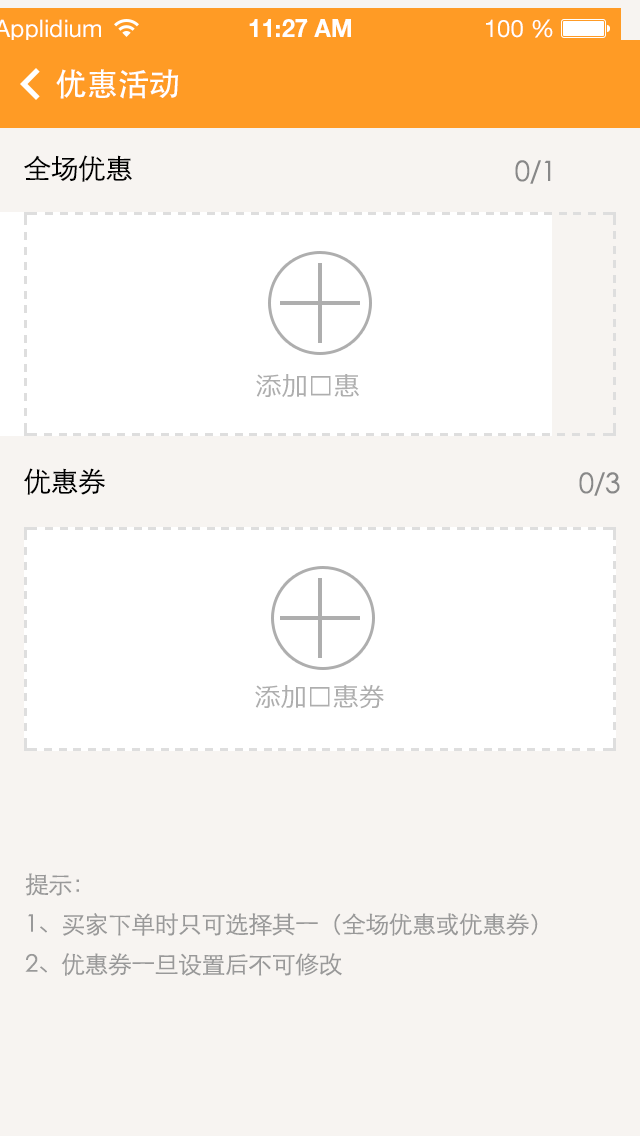
<style>
.page{position:relative;width:640px;height:1136px;background:#f7f4f1}
.page>*{position:absolute;margin:0}
.t1{font:32px "STHeiti";letter-spacing:-0.025em;color:#ffffff}
.t2{font:28px "STXihei";letter-spacing:-0.025em;color:#000000}
.t3{font:28px "STXihei";letter-spacing:-0.025em;color:#888888}
.t4{font:26px "Meiryo";color:#aeaeae}
.t5{font:26px "STHeiti";color:#aeaeae}
.t6{font:24px/40px "STXihei";letter-spacing:-0.025em;color:#999999}
</style>
<div class="page">
<p class="t1" style="left:56px;top:69px;width:123px;height:30px">优惠活动</p>
<p class="t2" style="left:24px;top:155px;width:108px;height:27px">全场优惠</p>
<p class="t3" style="left:515px;top:160px;width:36px;height:24px">0/1</p>
<p class="t4" style="left:256px;top:374px;width:103px;height:23px">添加<span class="t5">优</span>惠</p>
<p class="t2" style="left:24px;top:468px;width:81px;height:27px">优惠券</p>
<p class="t3" style="left:579px;top:472px;width:41px;height:24px">0/3</p>
<p class="t4" style="left:255px;top:685px;width:129px;height:24px">添加<span class="t5">优</span>惠券</p>
<p class="t6" style="left:25px;top:873px;width:513px;height:103px">提示：<br>1、买家下单时只可选择其一（全场优惠或优惠券）<br>2、优惠券一旦设置后不可修改</p>
</div>
